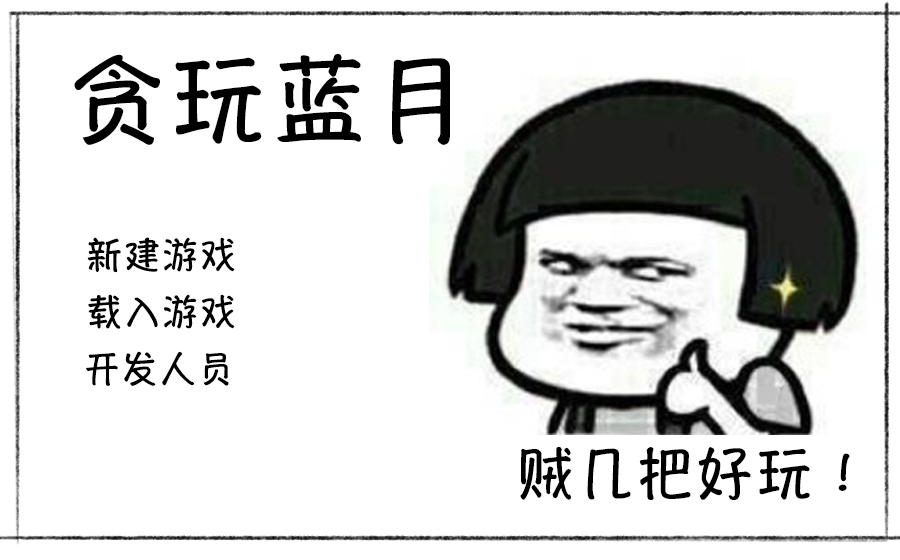
<style>
.page{position:relative;width:900px;height:560px;background:#ffffff}
.page>*{position:absolute;margin:0}
.t1{font:96px "HannotateSC-W7";letter-spacing:0.055em;color:#000000}
.t2{font:36px "HannotateSC-W7";letter-spacing:0.055em;color:#000000}
.t3{font:56.6px "HannotateSC-W7";letter-spacing:0.055em;color:#000000}
</style>
<div class="page">
<p class="t1" style="left:74px;top:54px;width:376px;height:91px">贪玩蓝月</p>
<p class="t2" style="left:87px;top:237px;width:148px;height:36px">新建游戏</p>
<p class="t2" style="left:88px;top:294px;width:147px;height:35px">载入游戏</p>
<p class="t2" style="left:86px;top:351px;width:143px;height:35px">开发人员</p>
<p class="t3" style="left:520px;top:446px;width:330px;height:54px">贼几把好玩！</p>
</div>
